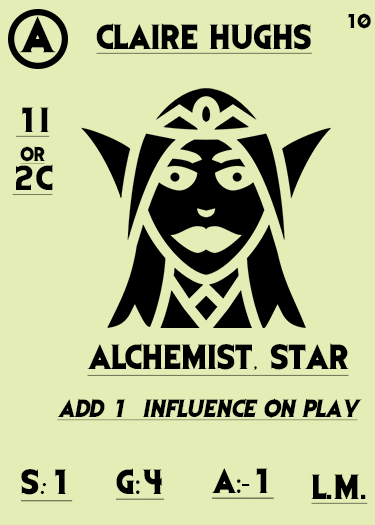
<style>
.page{position:relative;width:375px;height:525px;background:#e3edb5}
.page>*{position:absolute;margin:0}
.t1{font:41.7px "EvilDead";letter-spacing:-0.05em;color:#000000}
.t2{font:16.7px "EvilDead";letter-spacing:-0.05em;color:#000000}
.t3{font:29.2px "EvilDead";color:#000000;text-decoration:underline}
.t4{font:29.2px/29.2px "EvilDead";color:#000000;text-decoration:underline}
.t5{font:16.7px/29.2px "EvilDead";color:#000000;text-decoration:underline}
.t6{font:29.2px "Fadli-Script";color:#000000;text-decoration:underline}
.t7{font:20.8px "EvilDead";color:#000000;font-style:italic;text-decoration:underline}
.t8{font:29.2px "MyriadPro-Regular";color:#000000;text-decoration:underline}
</style>
<div class="page">
<p class="t1" style="left:19px;top:16px;width:37px;height:37px">A</p>
<p class="t2" style="left:348px;top:13px;width:23px;height:16px">10</p>
<p class="t3" style="left:96px;top:23px;width:216px;height:31px">CLAIRE HUGHS</p>
<p class="t4" style="left:12px;top:107px;width:41px;height:88px;text-align:center">1I<br><span class="t5">or<br></span>2C</p>
<p class="t3" style="left:87px;top:343px;width:262px;height:33px">ALCHEMIST<span class="t6">,</span> STAR</p>
<p class="t7" style="left:57px;top:398px;width:305px;height:23px">Add 1  influence on play</p>
<p class="t3" style="left:21px;top:469px;width:52px;height:33px">S<span class="t6">:</span>1</p>
<p class="t3" style="left:116px;top:468px;width:49px;height:32px">G<span class="t8">:</span>4</p>
<p class="t8" style="left:211px;top:468px;width:63px;height:31px"><span class="t3">A</span>:-<span class="t3">1</span></p>
<p class="t3" style="left:311px;top:474px;width:57px;height:30px">L.M.</p>
</div>
